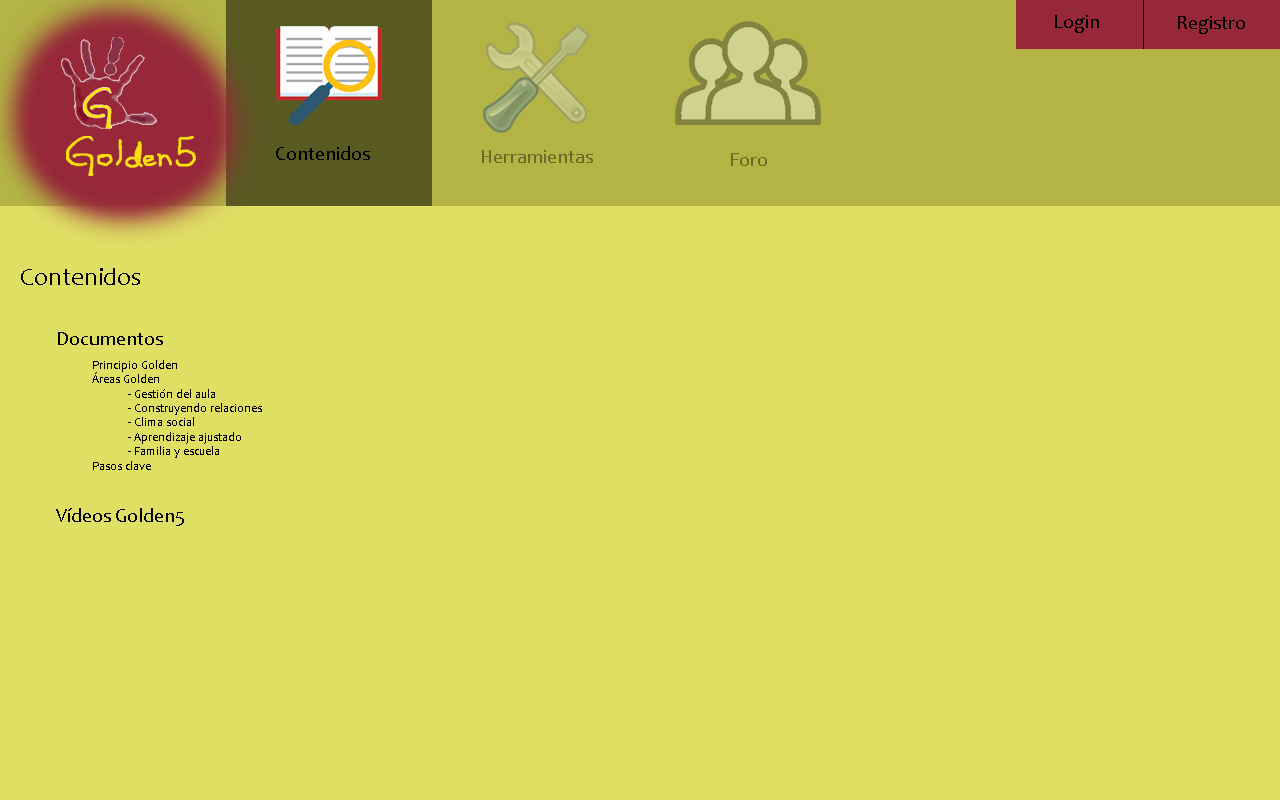
<style>
.page{position:relative;width:1280px;height:800px;background:#dedf63}
.page>*{position:absolute;margin:0}
.t1{font:12px "Candara";color:#000000}
.t2{font:25px "Candara";color:#000000}
.t3{font:20px "Candara";color:#000000}
</style>
<div class="page">
<p class="t1" style="left:21px;top:268px;width:241px;height:258px"><span class="t2">Contenidos<br><br> </span><span class="t3">Documentos<br>  </span>Principio Golden<br>  Áreas Golden<br>   - Gestión del aula<br>   - Construyendo relaciones<br>   - Clima social<br>   - Aprendizaje ajustado<br>   - Familia y escuela<br>  Pasos clave<br><br><br> <span class="t3">Vídeos Golden5</span></p>
</div>
